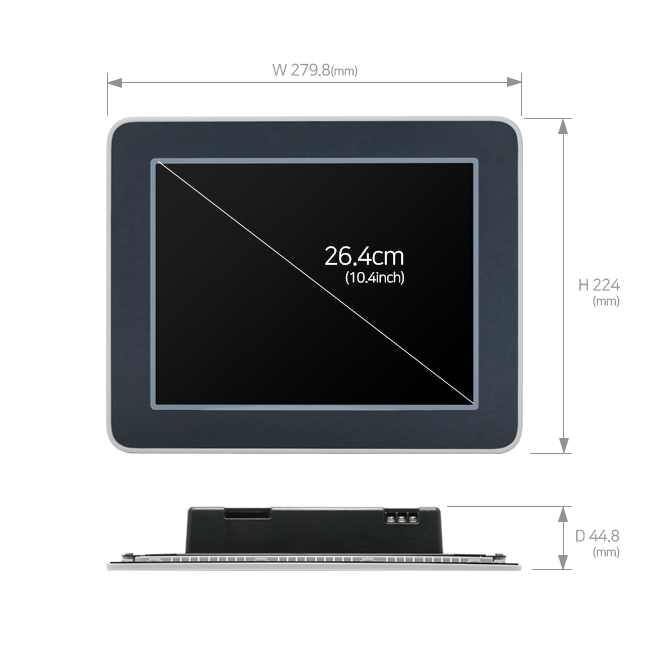
<style>
.page{position:relative;width:650px;height:650px;background:#ffffff}
.page>*{position:absolute;margin:0}
.t1{font:16px "NanumSquareR";letter-spacing:-0.03em;color:#939393}
.t2{font:12px "NanumSquareR";letter-spacing:-0.03em;color:#939393}
.t3{font:14px/18px "NanumSquareR";letter-spacing:-0.03em;color:#ffffff}
.t4{font:25px/18px "NanumSquareR";letter-spacing:-0.03em;color:#ffffff}
.t5{font:16px/15px "NanumSquareR";letter-spacing:-0.03em;color:#939393}
.t6{font:12px/15px "NanumSquareR";letter-spacing:-0.03em;color:#939393}
</style>
<div class="page">
<p class="t1" style="left:272px;top:63px;width:86px;height:15px">W 279.8<span class="t2">(mm)</span></p>
<p class="t3" style="left:325px;top:246px;width:79px;height:39px;text-align:right"><span class="t4">26.4cm<br></span>(10.4inch)</p>
<p class="t5" style="left:579px;top:278px;width:41px;height:30px;text-align:right">H 224<br><span class="t6">(mm)</span></p>
<p class="t5" style="left:576px;top:529px;width:44px;height:30px;text-align:right">D 44.8<br><span class="t6">(mm)</span></p>
</div>
